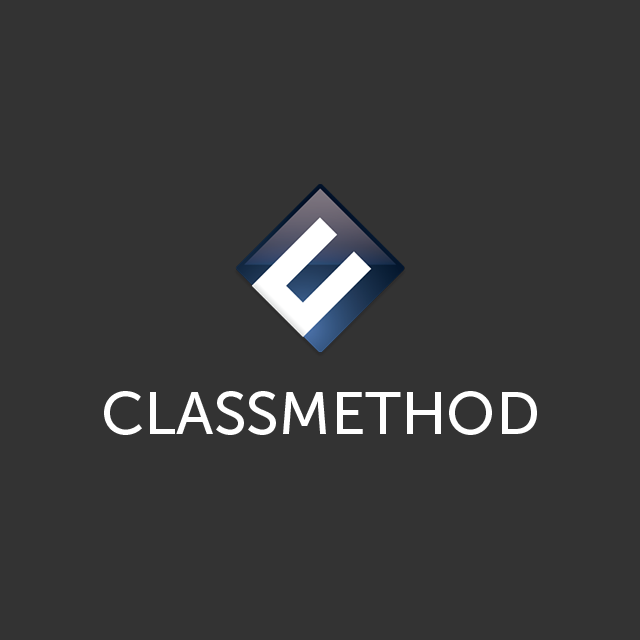
<style>
.page{position:relative;width:640px;height:640px;background:#333333}
.page>*{position:absolute;margin:0}
.t1{font:60px "MuseoSans-500";color:#ffffff}
</style>
<div class="page">
<p class="t1" style="left:104px;top:391px;width:433px;height:44px">CLASSMETHOD</p>
</div>
